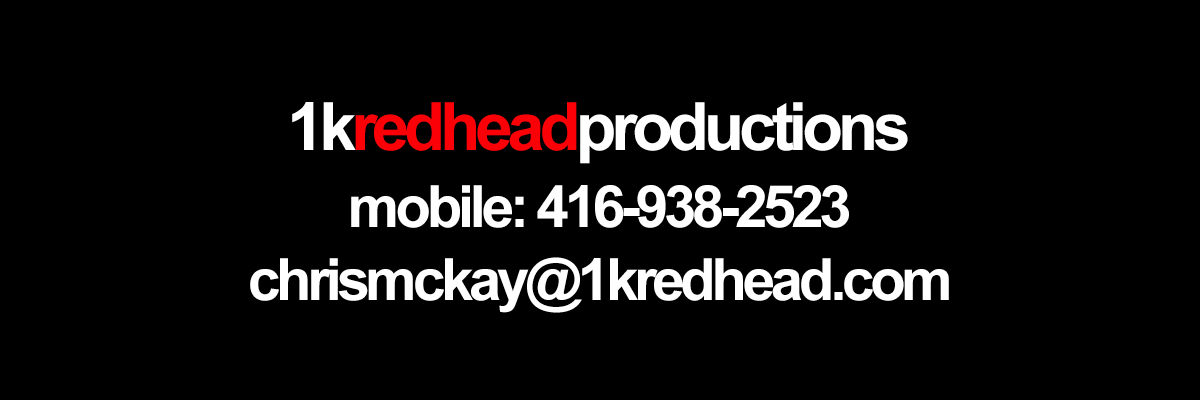
<style>
.page{position:relative;width:1200px;height:400px;background:#000000}
.page>*{position:absolute;margin:0}
.t1{font:66.7px "Arial-BoldMT";letter-spacing:-0.075em;color:#ffffff}
.t2{font:66.7px "Arial-BoldMT";letter-spacing:-0.075em;color:#fb0007}
.t3{font:58.3px "Arial-BoldMT";letter-spacing:-0.075em;color:#ffffff}
</style>
<div class="page">
<p class="t1" style="left:292px;top:102px;width:616px;height:62px">1k<span class="t2">redhead</span>productions</p>
<p class="t3" style="left:351px;top:185px;width:498px;height:43px">mobile: 416-938-2523</p>
<p class="t3" style="left:250px;top:257px;width:699px;height:56px">chrismckay@1kredhead.com</p>
</div>
